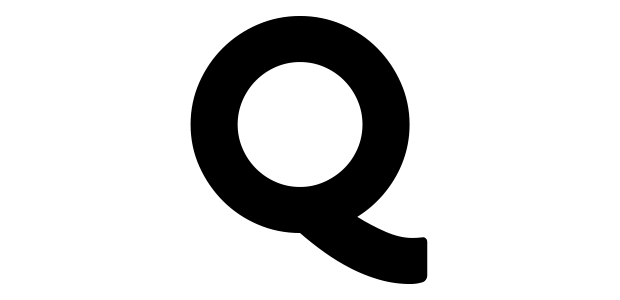
<style>
.page{position:relative;width:620px;height:300px;background:#ffffff}
.page>*{position:absolute;margin:0}
.t1{font:280px "Paralex-Regular2";color:#000000}
</style>
<div class="page">
<p class="t1" style="left:190px;top:16px;width:238px;height:268px">Q</p>
</div>
